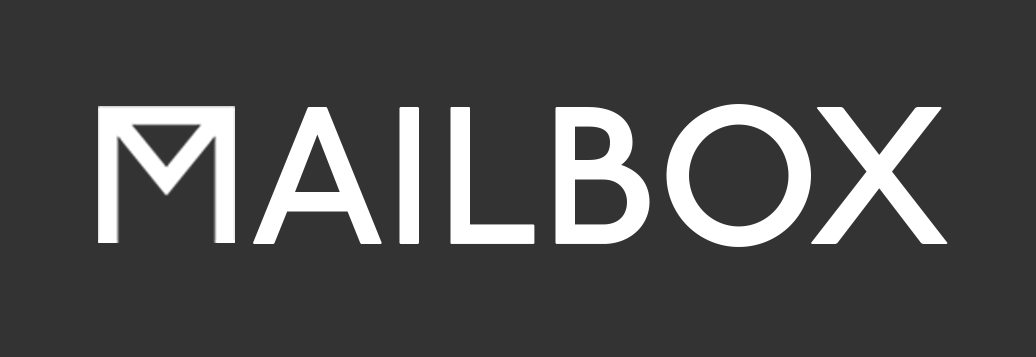
<style>
.page{position:relative;width:1036px;height:357px;background:#333333}
.page>*{position:absolute;margin:0}
.t1{font:195.9px "P22Underground-Medium";color:#ffffff}
</style>
<div class="page">
<p class="t1" style="left:253px;top:104px;width:695px;height:143px">AILBOX</p>
</div>
